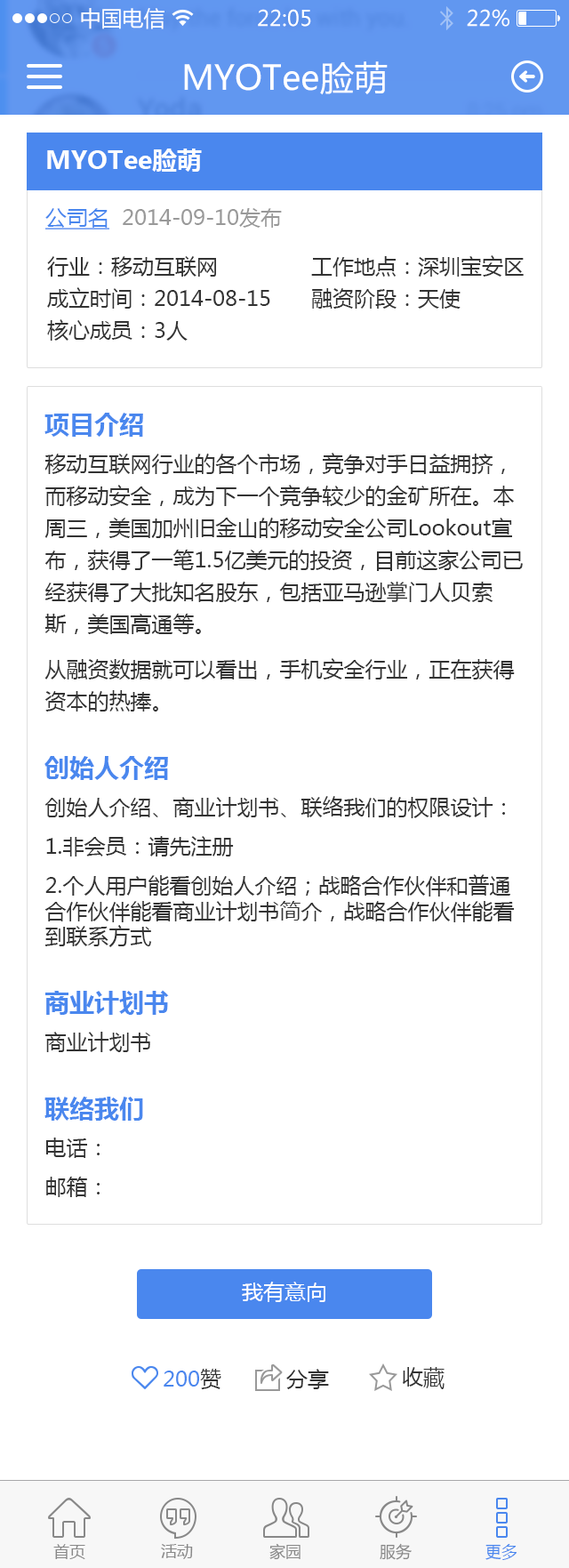
<style>
.page{position:relative;width:569px;height:1568px;background:#ffffff}
.page>*{position:absolute;margin:0}
.t1{font:21.3px "MicrosoftYaHei";color:#ffffff}
.t2{font:33.8px "MicrosoftYaHei";color:#ffffff}
.t3{font:24.9px "MicrosoftYaHei-Bold";color:#fefefe}
.t4{font:21.3px "MicrosoftYaHei";color:#999999}
.t5{font:21.3px "MicrosoftYaHei";color:#4a87ee;text-decoration:underline}
.t6{font:21.3px/32px "MicrosoftYaHei";color:#333333}
.t7{font:24.9px "MicrosoftYaHei-Bold";color:#4a87ee}
.t8{font:21.3px "MicrosoftYaHei";color:#333333}
.t9{font:21.3px "MicrosoftYaHei";color:#4a87ee}
.t10{font:16px "MicrosoftYaHei";color:#888888}
.t11{font:16px "MicrosoftYaHei";color:#4a87ee}
</style>
<div class="page">
<p class="t1" style="left:81px;top:8px;width:84px;height:21px">中国电信</p>
<p class="t1" style="left:258px;top:9px;width:53px;height:18px">22:05</p>
<p class="t1" style="left:467px;top:9px;width:43px;height:18px">22%</p>
<p class="t2" style="left:184px;top:61px;width:204px;height:34px">MYOTee脸萌</p>
<p class="t3" style="left:47px;top:149px;width:155px;height:23px">MYOTee脸萌</p>
<p class="t4" style="left:45px;top:208px;width:237px;height:21px"><span class="t5">公司名</span>  2014-09-10发布</p>
<p class="t6" style="left:47px;top:256px;width:223px;height:85px">行业：移动互联网<br>成立时间：2014-08-15<br>核心成员：3人</p>
<p class="t6" style="left:311px;top:255px;width:213px;height:54px">工作地点：深圳宝安区<br>融资阶段：天使</p>
<p class="t7" style="left:44px;top:413px;width:99px;height:24px">项目介绍</p>
<p class="t6" style="left:44px;top:453px;width:479px;height:259px">移动互联网行业的各个市场，竞争对手日益拥挤，而移动安全，成为下一个竞争较少的金矿所在。本周三，美国加州旧金山的移动安全公司Lookout宣布，获得了一笔1.5亿美元的投资，目前这家公司已经获得了大批知名股东，包括亚马逊掌门人贝索斯，美国高通等。<br>从融资数据就可以看出，手机安全行业，正在获得资本的热捧。</p>
<p class="t7" style="left:44px;top:756px;width:124px;height:24px">创始人介绍</p>
<p class="t8" style="left:44px;top:796px;width:470px;height:151px">创始人介绍、商业计划书、联络我们的权限设计：<br>1.非会员：请先注册<br>2.个人用户能看创始人介绍；战略合作伙伴和普通合作伙伴能看商业计划书简介，战略合作伙伴能看到联系方式</p>
<p class="t7" style="left:45px;top:990px;width:124px;height:25px">商业计划书</p>
<p class="t8" style="left:45px;top:1032px;width:106px;height:20px">商业计划书</p>
<p class="t7" style="left:44px;top:1097px;width:99px;height:24px">联络我们</p>
<p class="t8" style="left:46px;top:1138px;width:54px;height:59px">电话：<br>邮箱：</p>
<p class="t1" style="left:242px;top:1282px;width:84px;height:20px">我有意向</p>
<p class="t9" style="left:164px;top:1369px;width:57px;height:20px">200<span class="t8">赞</span></p>
<p class="t8" style="left:286px;top:1369px;width:43px;height:20px">分享</p>
<p class="t8" style="left:403px;top:1367px;width:42px;height:22px">收藏</p>
<p class="t10" style="left:53px;top:1544px;width:32px;height:15px">首页</p>
<p class="t10" style="left:161px;top:1544px;width:32px;height:15px">活动</p>
<p class="t10" style="left:269px;top:1543px;width:32px;height:17px">家园</p>
<p class="t10" style="left:380px;top:1543px;width:32px;height:17px">服务</p>
<p class="t11" style="left:486px;top:1544px;width:31px;height:16px">更多</p>
</div>
